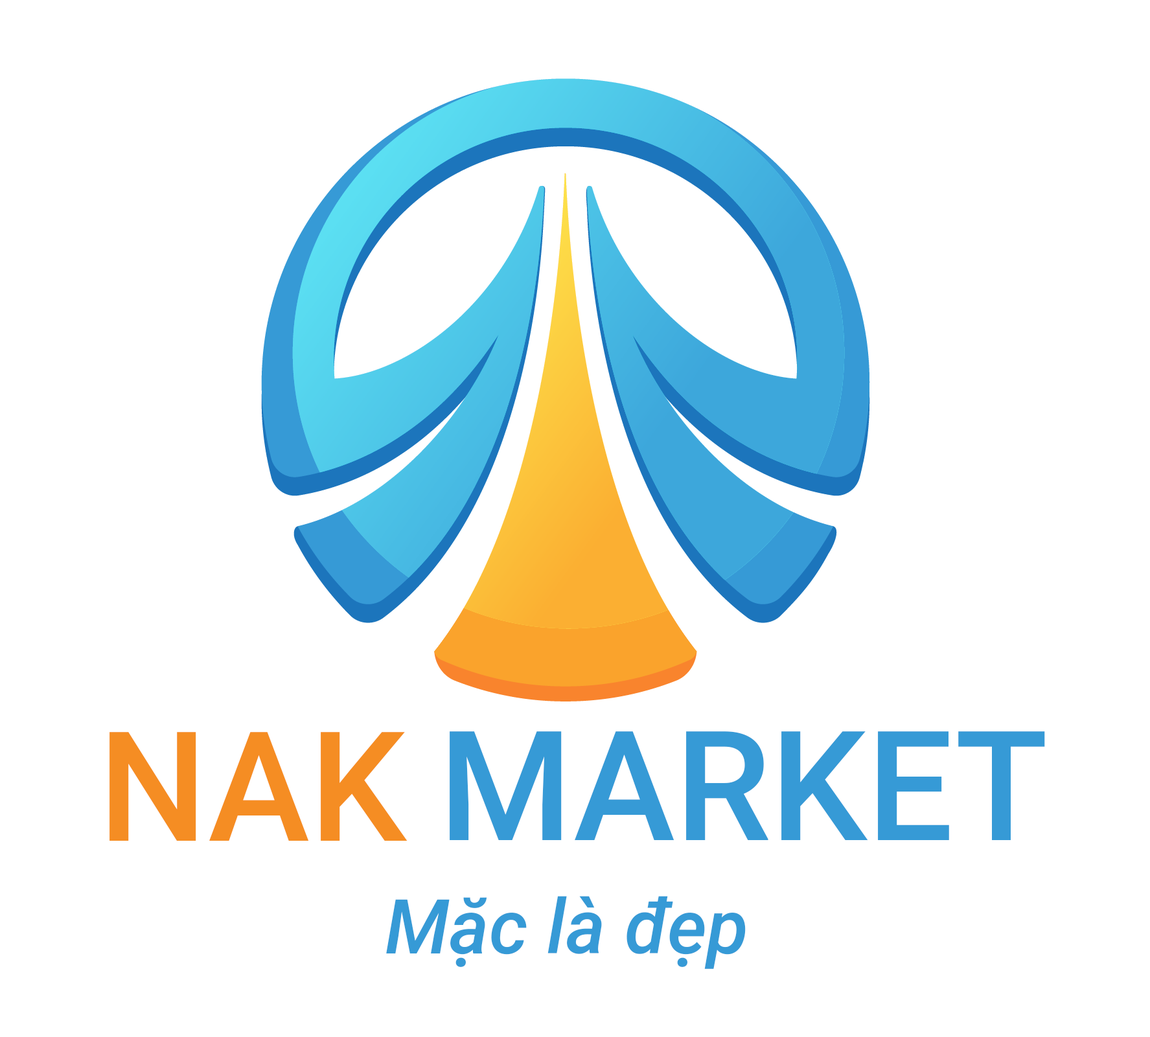
<style>
.page{position:relative;width:1150px;height:1037px;background:#ffffff}
.page>*{position:absolute;margin:0}
.t1{font:152.7px "Roboto-Medium";color:#f58d23}
.t2{font:152.7px "Roboto-Medium";color:#369ad6}
.t3{font:75.6px "Roboto-MediumItalic";color:#369ad6}
</style>
<div class="page">
<p class="t1" style="left:109px;top:732px;width:298px;height:109px">NAK</p>
<p class="t2" style="left:450px;top:731px;width:595px;height:109px">MARKET</p>
<p class="t3" style="left:386px;top:896px;width:360px;height:73px">Mặc là đẹp</p>
</div>
